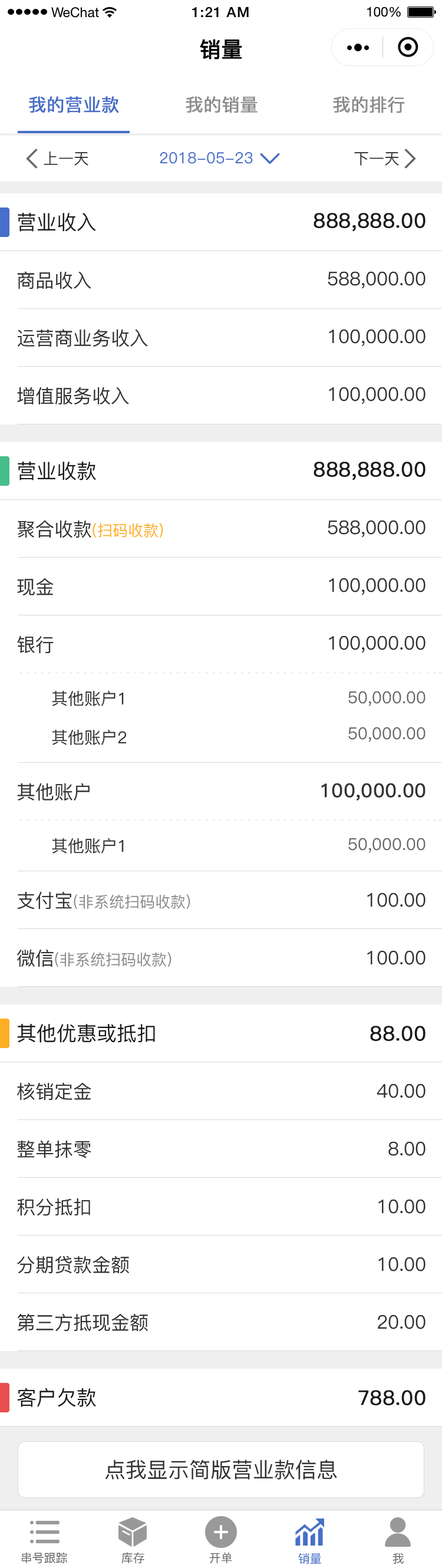
<style>
.page{position:relative;width:442px;height:1568px;background:#ffffff}
.page>*{position:absolute;margin:0}
.t1{font:21.2px "PingFang-SC-Medium";color:#000000;font-weight:bold}
.t2{font:17.7px "PingFang-SC-Medium";color:#476ec9;font-weight:bold}
.t3{font:17.7px "PingFang-SC-Medium";color:#8c8c8c;font-weight:bold}
.t4{font:15.3px "PingFang-SC-Medium";color:#333333}
.t5{font:15.3px "PingFang-SC-Medium";color:#476ec9}
.t6{font:20px "PingFang-SC-Medium";color:#1a1a1a}
.t7{font:20px "PingFang-SC-Medium";color:#1a1a1a;font-weight:bold}
.t8{font:18.9px "PingFang-SC-Medium";color:#333333}
.t9{font:15.3px "PingFang-SC-Medium";color:#ffaf23}
.t10{font:16.5px "PingFang-SC-Medium";color:#333333}
.t11{font:16.5px "PingFang-SC-Medium";color:#666666}
.t12{font:18.9px "PingFang-SC-Medium";color:#333333;font-weight:bold}
.t13{font:15.3px "PingFang-SC-Medium";color:#8c8c8c}
.t14{font:21.2px "PingFang-SC-Medium";color:#333333}
.t15{font:11.8px "PingFang-SC-Medium";color:#666666}
.t16{font:11.8px "PingFang-SC-Medium";color:#476ec9}
</style>
<div class="page">
<p class="t1" style="left:200px;top:39px;width:42px;height:21px">销量</p>
<p class="t2" style="left:29px;top:96px;width:90px;height:17px">我的营业款</p>
<p class="t3" style="left:186px;top:96px;width:72px;height:17px">我的销量</p>
<p class="t3" style="left:333px;top:96px;width:72px;height:17px">我的排行</p>
<p class="t4" style="left:44px;top:151px;width:44px;height:15px">上一天</p>
<p class="t5" style="left:160px;top:152px;width:93px;height:12px">2018-05-23</p>
<p class="t4" style="left:354px;top:152px;width:45px;height:14px">下一天</p>
<p class="t6" style="left:18px;top:213px;width:78px;height:19px">营业收入</p>
<p class="t7" style="left:314px;top:213px;width:112px;height:19px">888,888.00</p>
<p class="t8" style="left:17px;top:271px;width:74px;height:18px">商品收入</p>
<p class="t8" style="left:328px;top:271px;width:98px;height:18px">588,000.00</p>
<p class="t8" style="left:18px;top:329px;width:130px;height:18px">运营商业务收入</p>
<p class="t8" style="left:329px;top:329px;width:97px;height:18px">100,000.00</p>
<p class="t8" style="left:17px;top:387px;width:112px;height:18px">增值服务收入</p>
<p class="t8" style="left:329px;top:387px;width:97px;height:17px">100,000.00</p>
<p class="t6" style="left:18px;top:462px;width:78px;height:18px">营业收款</p>
<p class="t7" style="left:314px;top:462px;width:112px;height:18px">888,888.00</p>
<p class="t9" style="left:17px;top:520px;width:146px;height:18px"><span class="t8">聚合收款</span>(扫码收款)</p>
<p class="t8" style="left:328px;top:520px;width:98px;height:18px">588,000.00</p>
<p class="t8" style="left:17px;top:578px;width:37px;height:18px">现金</p>
<p class="t8" style="left:329px;top:578px;width:97px;height:17px">100,000.00</p>
<p class="t8" style="left:17px;top:636px;width:37px;height:18px">银行</p>
<p class="t8" style="left:329px;top:635px;width:97px;height:18px">100,000.00</p>
<p class="t10" style="left:52px;top:691px;width:72px;height:15px">其他账户1</p>
<p class="t11" style="left:348px;top:691px;width:78px;height:15px">50,000.00</p>
<p class="t10" style="left:52px;top:730px;width:74px;height:15px">其他账户2</p>
<p class="t11" style="left:348px;top:727px;width:78px;height:15px">50,000.00</p>
<p class="t8" style="left:17px;top:783px;width:73px;height:18px">其他账户</p>
<p class="t12" style="left:321px;top:783px;width:105px;height:18px">100,000.00</p>
<p class="t10" style="left:52px;top:838px;width:72px;height:16px">其他账户1</p>
<p class="t11" style="left:348px;top:838px;width:78px;height:15px">50,000.00</p>
<p class="t13" style="left:17px;top:891px;width:173px;height:19px"><span class="t8">支付宝</span>(非系统扫码收款)</p>
<p class="t8" style="left:367px;top:892px;width:59px;height:15px">100.00</p>
<p class="t13" style="left:17px;top:949px;width:155px;height:18px"><span class="t8">微信</span>(非系统扫码收款)</p>
<p class="t8" style="left:367px;top:950px;width:59px;height:15px">100.00</p>
<p class="t6" style="left:17px;top:1024px;width:138px;height:19px">其他优惠或抵扣</p>
<p class="t7" style="left:370px;top:1026px;width:56px;height:15px">88.00</p>
<p class="t8" style="left:17px;top:1082px;width:74px;height:19px">核销定金</p>
<p class="t8" style="left:377px;top:1083px;width:49px;height:15px">40.00</p>
<p class="t8" style="left:17px;top:1140px;width:74px;height:18px">整单抹零</p>
<p class="t8" style="left:388px;top:1141px;width:38px;height:15px">8.00</p>
<p class="t8" style="left:17px;top:1198px;width:73px;height:18px">积分抵扣</p>
<p class="t8" style="left:378px;top:1199px;width:48px;height:15px">10.00</p>
<p class="t8" style="left:17px;top:1256px;width:112px;height:18px">分期贷款金额</p>
<p class="t8" style="left:378px;top:1257px;width:48px;height:14px">10.00</p>
<p class="t8" style="left:17px;top:1313px;width:131px;height:19px">第三方抵现金额</p>
<p class="t8" style="left:378px;top:1315px;width:48px;height:14px">20.00</p>
<p class="t6" style="left:17px;top:1388px;width:79px;height:19px">客户欠款</p>
<p class="t7" style="left:358px;top:1390px;width:68px;height:15px">788.00</p>
<p class="t14" style="left:105px;top:1460px;width:232px;height:20px">点我显示简版营业款信息</p>
<p class="t15" style="left:22px;top:1552px;width:45px;height:11px">串号跟踪</p>
<p class="t15" style="left:121px;top:1552px;width:23px;height:11px">库存</p>
<p class="t15" style="left:209px;top:1552px;width:23px;height:11px">开单</p>
<p class="t16" style="left:298px;top:1553px;width:23px;height:11px">销量</p>
<p class="t15" style="left:393px;top:1553px;width:11px;height:11px">我</p>
</div>
